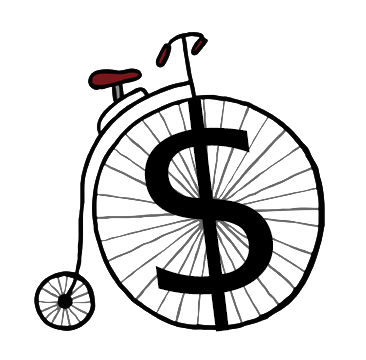
<style>
.page{position:relative;width:366px;height:360px;background:#ffffff}
.page>*{position:absolute;margin:0}
.t1{font:256.5px "BitstreamVeraSansMono-Roman";letter-spacing:0.08em;color:#000000;scale:1.03 1}
</style>
<div class="page">
<p class="t1" style="left:144px;top:98px;width:129px;height:234px;rotate:-7deg">$</p>
</div>
